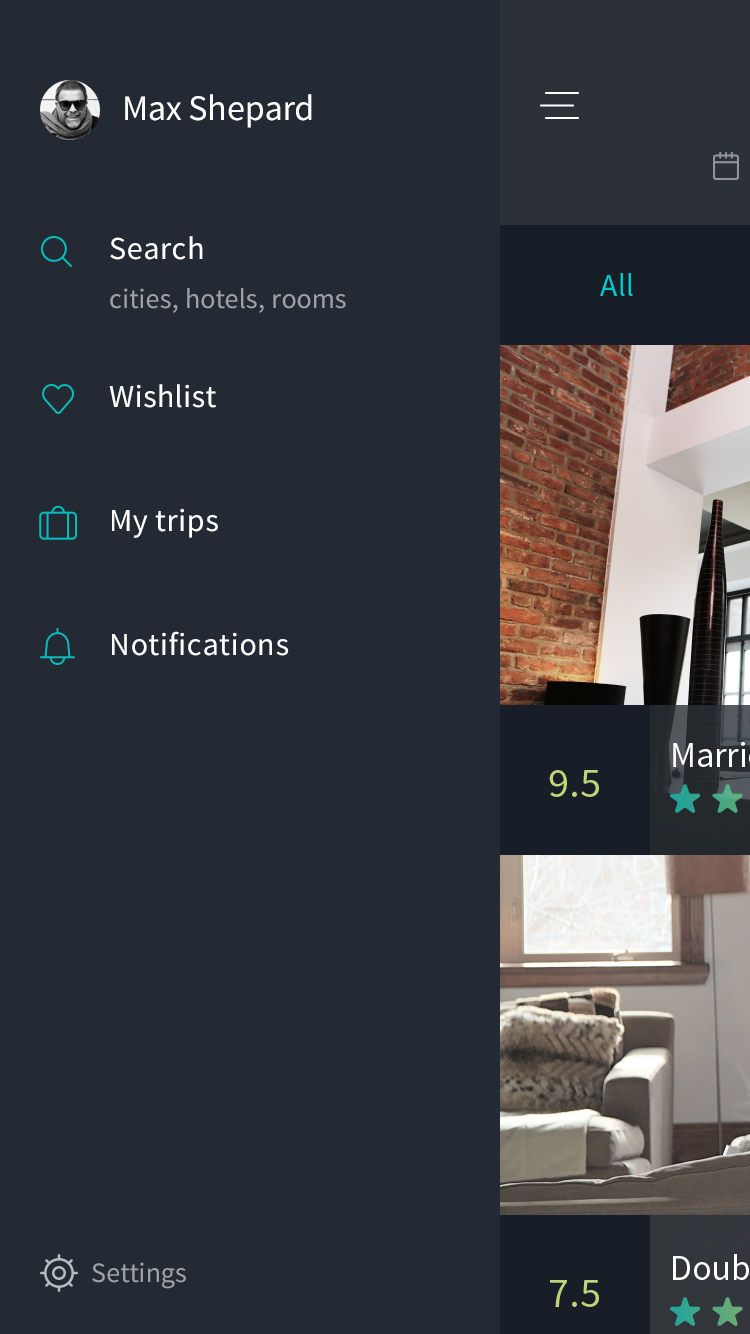
<style>
.page{position:relative;width:750px;height:1334px;background:#242a34}
.page>*{position:absolute;margin:0}
.t1{font:36px "SourceSansPro-Regular";letter-spacing:-0.005em;color:#ffffff}
.t2{font:32px "SourceSansPro-Regular";letter-spacing:0.02em;color:#ffffff}
.t3{font:28px "SourceSansPro-Regular";letter-spacing:0.005em;color:#9da1a7}
</style>
<div class="page">
<p class="t1" style="left:125px;top:94px;width:187px;height:34px">Max Shepard</p>
<p class="t2" style="left:110px;top:236px;width:93px;height:24px">Search</p>
<p class="t3" style="left:110px;top:288px;width:236px;height:25px">cities, hotels, rooms</p>
<p class="t2" style="left:109px;top:384px;width:107px;height:24px">Wishlist</p>
<p class="t2" style="left:112px;top:508px;width:106px;height:30px">My trips</p>
<p class="t2" style="left:112px;top:631px;width:177px;height:25px">Notifications</p>
<p class="t3" style="left:92px;top:1262px;width:94px;height:27px">Settings</p>
</div>
